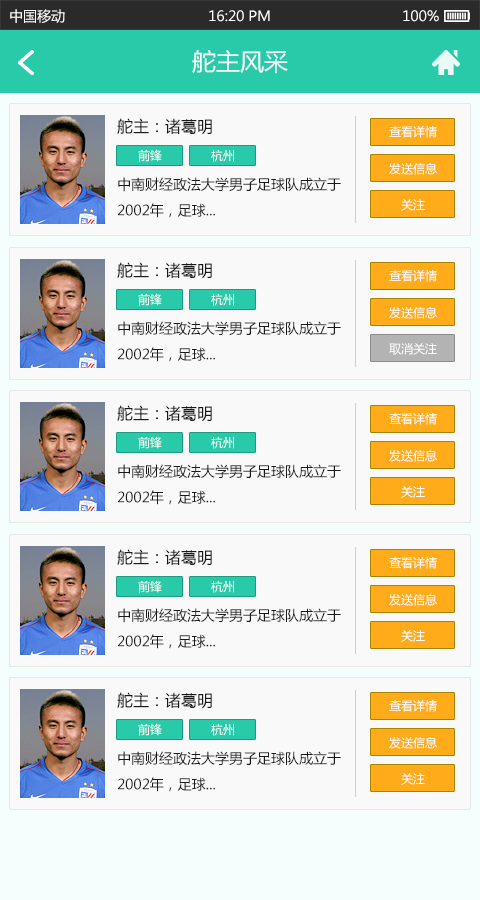
<style>
.page{position:relative;width:480px;height:900px;background:#f9f9f9}
.page>*{position:absolute;margin:0}
.t1{font:14px "MicrosoftYaHei";color:#ffffff}
.t2{font:24px "MicrosoftYaHei";color:#f4fffd}
.t3{font:16px "MicrosoftYaHei";color:#191919}
.t4{font:12px "MicrosoftYaHei";color:#ffffff}
.t5{font:14px/26px "MicrosoftYaHei";color:#191919}
</style>
<div class="page">
<p class="t1" style="left:10px;top:9px;width:55px;height:14px">中国移动</p>
<p class="t1" style="left:209px;top:10px;width:61px;height:12px">16:20 PM</p>
<p class="t1" style="left:403px;top:10px;width:36px;height:12px">100%</p>
<p class="t2" style="left:192px;top:50px;width:96px;height:24px">舵主风采</p>
<p class="t3" style="left:117px;top:118px;width:95px;height:17px">舵主：诸葛明</p>
<p class="t4" style="left:389px;top:126px;width:48px;height:12px">查看详情</p>
<p class="t4" style="left:138px;top:149px;width:24px;height:13px">前锋</p>
<p class="t4" style="left:211px;top:149px;width:23px;height:13px">杭州</p>
<p class="t4" style="left:389px;top:163px;width:48px;height:12px">发送信息</p>
<p class="t5" style="left:117px;top:177px;width:224px;height:41px">中南财经政法大学男子足球队成立于2002年，足球...</p>
<p class="t4" style="left:401px;top:199px;width:24px;height:12px">关注</p>
<p class="t3" style="left:117px;top:262px;width:95px;height:17px">舵主：诸葛明</p>
<p class="t4" style="left:389px;top:270px;width:48px;height:12px">查看详情</p>
<p class="t4" style="left:138px;top:293px;width:24px;height:13px">前锋</p>
<p class="t4" style="left:211px;top:293px;width:23px;height:13px">杭州</p>
<p class="t4" style="left:389px;top:307px;width:48px;height:12px">发送信息</p>
<p class="t5" style="left:117px;top:321px;width:224px;height:41px">中南财经政法大学男子足球队成立于2002年，足球...</p>
<p class="t4" style="left:389px;top:343px;width:48px;height:12px">取消关注</p>
<p class="t3" style="left:117px;top:405px;width:95px;height:17px">舵主：诸葛明</p>
<p class="t4" style="left:389px;top:413px;width:48px;height:12px">查看详情</p>
<p class="t4" style="left:138px;top:436px;width:24px;height:13px">前锋</p>
<p class="t4" style="left:211px;top:436px;width:23px;height:13px">杭州</p>
<p class="t4" style="left:389px;top:450px;width:48px;height:12px">发送信息</p>
<p class="t5" style="left:117px;top:464px;width:224px;height:41px">中南财经政法大学男子足球队成立于2002年，足球...</p>
<p class="t4" style="left:401px;top:486px;width:24px;height:12px">关注</p>
<p class="t3" style="left:117px;top:549px;width:95px;height:17px">舵主：诸葛明</p>
<p class="t4" style="left:389px;top:557px;width:48px;height:12px">查看详情</p>
<p class="t4" style="left:138px;top:580px;width:24px;height:13px">前锋</p>
<p class="t4" style="left:211px;top:580px;width:23px;height:13px">杭州</p>
<p class="t4" style="left:389px;top:594px;width:48px;height:12px">发送信息</p>
<p class="t5" style="left:117px;top:608px;width:224px;height:41px">中南财经政法大学男子足球队成立于2002年，足球...</p>
<p class="t4" style="left:401px;top:630px;width:24px;height:12px">关注</p>
<p class="t3" style="left:117px;top:692px;width:95px;height:17px">舵主：诸葛明</p>
<p class="t4" style="left:389px;top:700px;width:48px;height:12px">查看详情</p>
<p class="t4" style="left:138px;top:723px;width:24px;height:13px">前锋</p>
<p class="t4" style="left:211px;top:723px;width:23px;height:13px">杭州</p>
<p class="t4" style="left:389px;top:737px;width:48px;height:12px">发送信息</p>
<p class="t5" style="left:117px;top:751px;width:224px;height:41px">中南财经政法大学男子足球队成立于2002年，足球...</p>
<p class="t4" style="left:401px;top:773px;width:24px;height:12px">关注</p>
</div>
